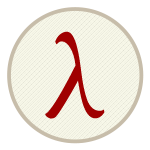
<style>
.page{position:relative;width:150px;height:150px;background:#ffffff}
.page>*{position:absolute;margin:0}
.t1{font:124px "Crimson-Roman";color:#a00000}
</style>
<div class="page">
<p class="t1" style="left:45px;top:31px;width:60px;height:88px">λ</p>
</div>
